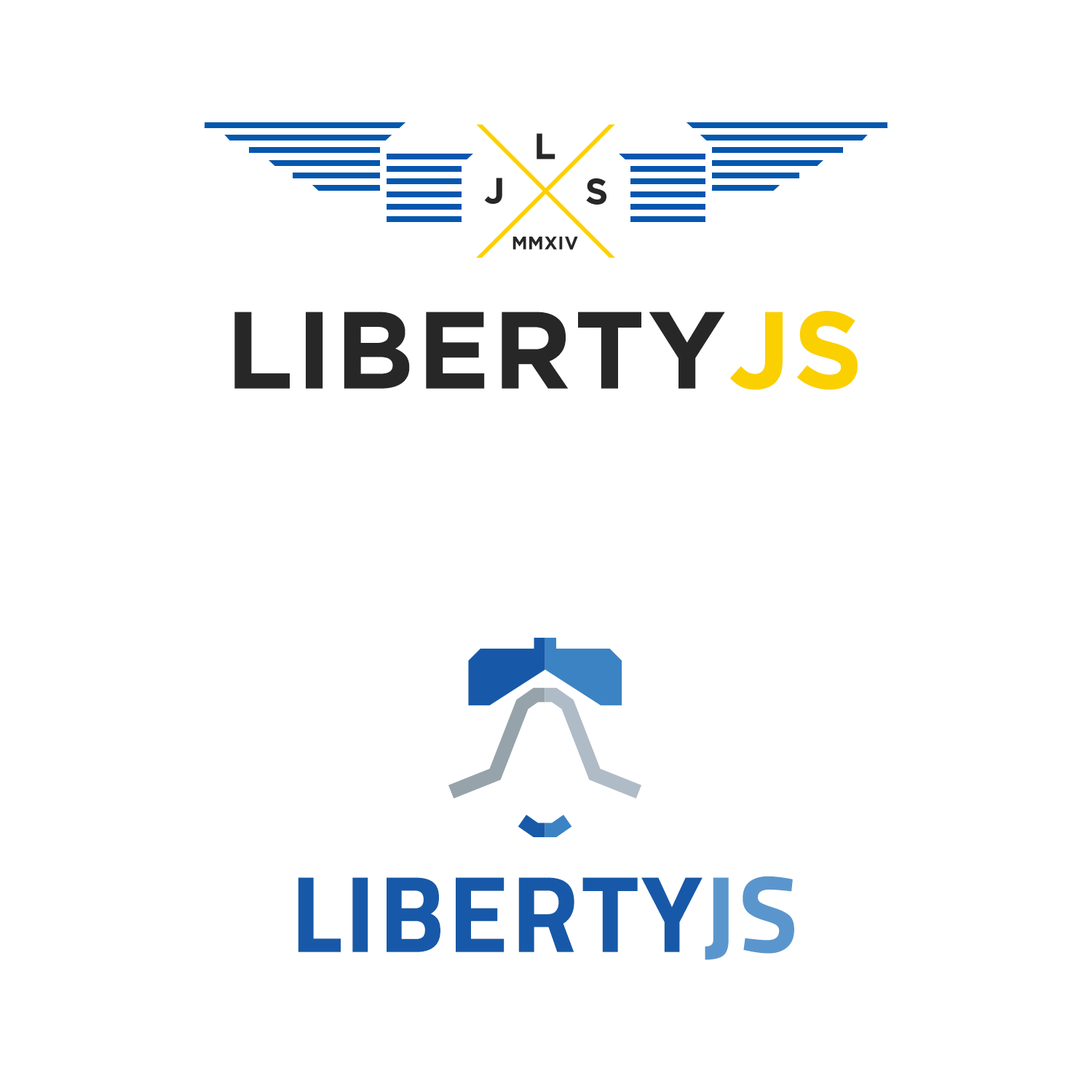
<style>
.page{position:relative;width:1092px;height:1092px;background:#ffffff}
.page>*{position:absolute;margin:0}
.t1{font:36.4px "Gotham-Bold";letter-spacing:0.025em;color:#272727;text-transform:uppercase}
.t2{font:18.2px "Gotham-Bold";letter-spacing:0.025em;color:#272727;text-transform:uppercase}
.t3{font:109.2px "Gotham-Bold";letter-spacing:0.025em;color:#272727;text-transform:uppercase}
.t4{font:109.2px "Gotham-Bold";letter-spacing:0.025em;color:#fbd000;text-transform:uppercase}
.t5{font:109.2px "TitilliumWeb-Bold";letter-spacing:0.025em;color:#1759a8;text-transform:uppercase}
.t6{font:109.2px "TitilliumWeb-Bold";letter-spacing:0.025em;color:#5a96cd;text-transform:uppercase}
</style>
<div class="page">
<p class="t1" style="left:537px;top:133px;width:18px;height:26px">L</p>
<p class="t1" style="left:484px;top:178px;width:18px;height:26px">J</p>
<p class="t1" style="left:586px;top:178px;width:20px;height:27px">S</p>
<p class="t2" style="left:513px;top:237px;width:65px;height:13px">MMXIV</p>
<p class="t3" style="left:234px;top:311px;width:624px;height:79px">Liberty<span class="t4">JS</span></p>
<p class="t5" style="left:298px;top:876px;width:496px;height:84px">Liberty<span class="t6">JS</span></p>
</div>
